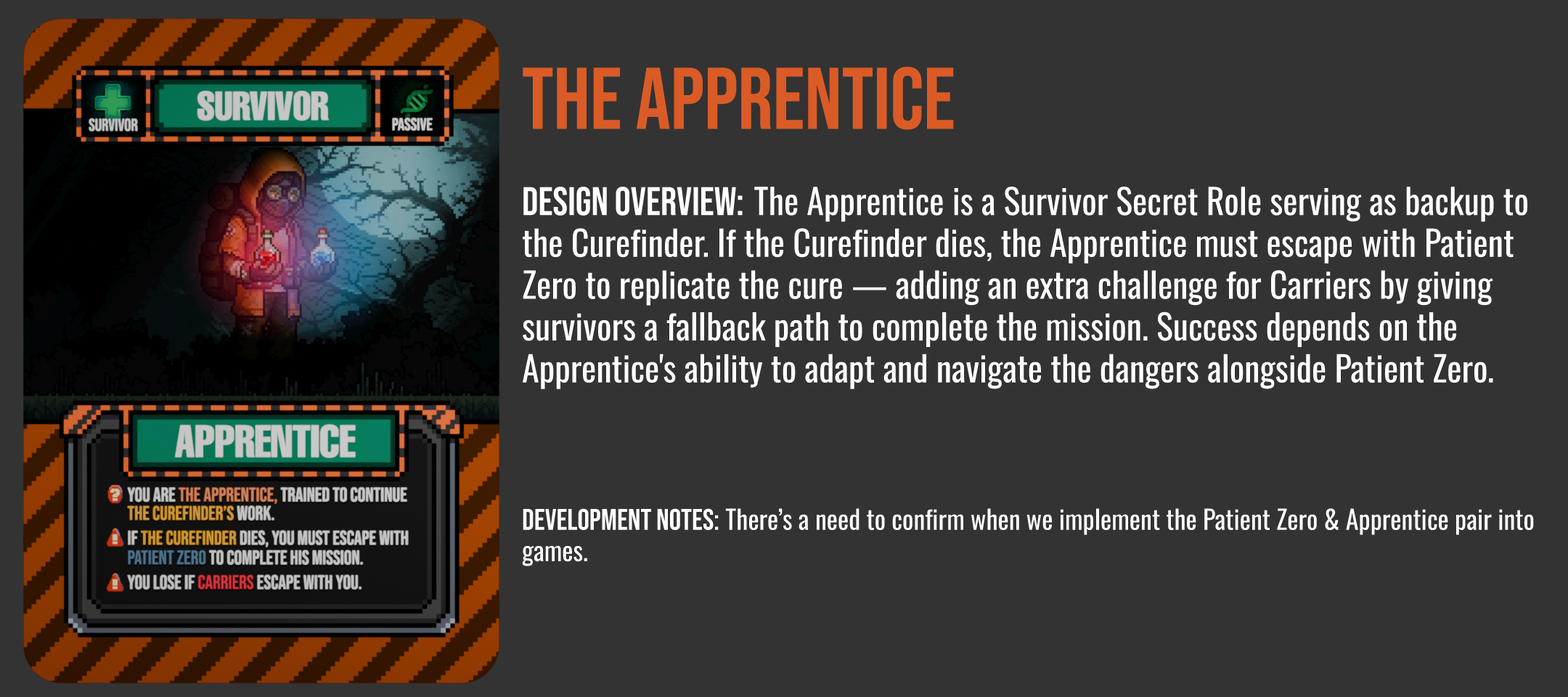
<style>
.page{position:relative;width:1568px;height:697px;background:#333333}
.page>*{position:absolute;margin:0}
.t1{font:87.1px "BebasNeue-Regular";color:#db5b26}
.t2{font:34.8px "Oswald-Regular";color:#ffffff}
.t3{font:39.9px "BebasNeue-Regular";color:#ffffff}
.t4{font:26.1px "Oswald-Regular";color:#ffffff}
.t5{font:29.8px "BebasNeue-Regular";color:#ffffff}
</style>
<div class="page">
<p class="t1" style="left:523px;top:67px;width:431px;height:63px">THE apprentice</p>
<p class="t2" style="left:523px;top:187px;width:1004px;height:202px"><span class="t3">Design Overview: </span>The Apprentice is a Survivor Secret Role serving as backup to the Curefinder. If the Curefinder dies, the Apprentice must escape with Patient Zero to replicate the cure — adding an extra challenge for Carriers by giving survivors a fallback path to complete the mission. Success depends on the Apprentice's ability to adapt and navigate the dangers alongside Patient Zero.</p>
<p class="t4" style="left:522px;top:508px;width:1012px;height:58px"><span class="t5">development Notes:</span> There’s a need to confirm when we implement the Patient Zero &amp; Apprentice pair into games.</p>
</div>
